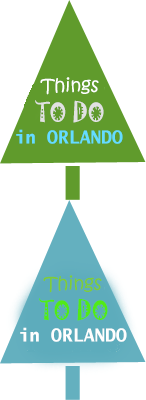
<style>
.page{position:relative;width:146px;height:400px;background:#ffffff}
.page>*{position:absolute;margin:0}
.t1{font:18px "KristenITC-Regular";color:#ffffff}
.t2{font:24.8px "Jokerman-Regular";color:#e1e1e1;scale:0.89 1}
.t3{font:18px "LucidaSans-TypewriterBold";color:#64dcff}
.t4{font:18px "KristenITC-Regular";color:#7ecb3a}
.t5{font:24.8px "Jokerman-Regular";color:#52ea16;scale:0.89 1}
.t6{font:18px "LucidaSans-TypewriterBold";color:#fefefe}
</style>
<div class="page">
<p class="t1" style="left:40px;top:77px;width:59px;height:18px">Things</p>
<p class="t2" style="left:35px;top:100px;width:69px;height:23px">TO DO</p>
<p class="t3" style="left:16px;top:129px;width:107px;height:15px">in ORLANDO</p>
<p class="t4" style="left:43px;top:275px;width:59px;height:18px">Things</p>
<p class="t5" style="left:39px;top:298px;width:69px;height:23px">TO DO</p>
<p class="t6" style="left:20px;top:327px;width:107px;height:15px">in ORLANDO</p>
</div>
